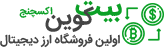
<style>
.page{position:relative;width:164px;height:49px;background:#ffffff}
.page>*{position:absolute;margin:0}
.t1{font:10px "IRANSansWeb-Bold";color:#0ba026}
.t2{font:24px "IRANSansWeb-Bold";color:#444444}
.t3{font:28px "IRANSansWeb-Bold";color:#0ba026}
.t4{font:12px "IRANSansWeb-Bold";color:#444444}
</style>
<div class="page">
<p class="t1" style="left:19px;top:6px;width:34px;height:12px">اکسچنج</p>
<p class="t2" style="left:45px;top:6px;width:49px;height:26px">کوین</p>
<p class="t3" style="left:75px;top:0px;width:47px;height:23px">بیت</p>
<p class="t4" style="left:0px;top:33px;width:120px;height:15px">اولین فروشگاه ارز دیجیتال</p>
</div>
